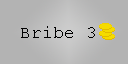
<style>
.page{position:relative;width:128px;height:64px;background:#b3b3b3}
.page>*{position:absolute;margin:0}
.t1{font:18px "CourierNewPSMT";color:#000000}
</style>
<div class="page">
<p class="t1" style="left:21px;top:26px;width:74px;height:12px">Bribe 3</p>
</div>
